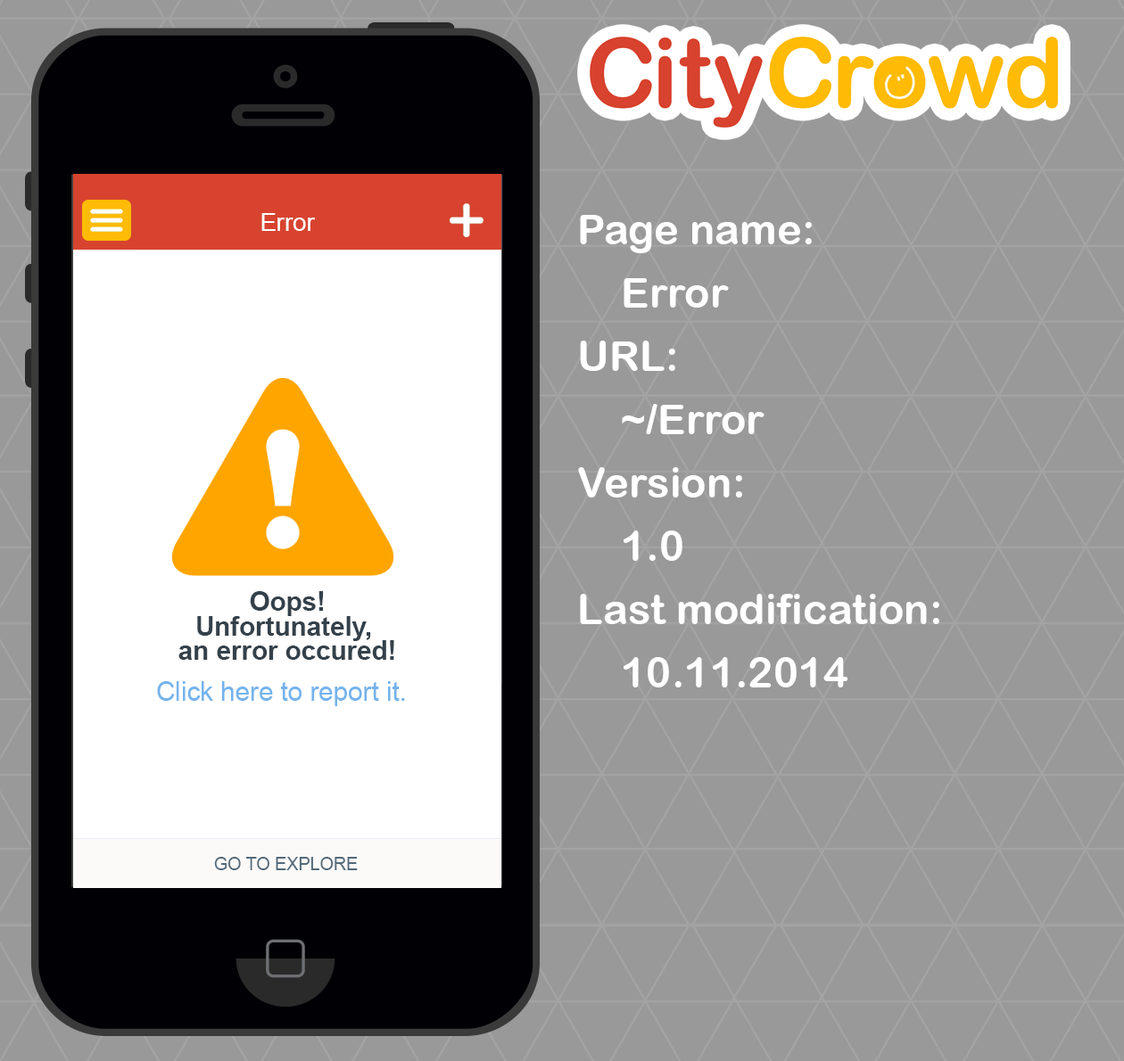
<style>
.page{position:relative;width:1124px;height:1061px;background:#999999}
.page>*{position:absolute;margin:0}
.t1{font:24.6px "ArialMT";color:#ffffff}
.t2{font:42.2px/63.3px "ArialRoundedMTBold";color:#ffffff}
.t3{font:26.4px/24.6px "Arial-BoldMT";color:#34414b}
.t4{font:26.4px "ArialMT";color:#74b3ed}
.t5{font:17.6px "ArialMT";color:#536a7a}
</style>
<div class="page">
<p class="t1" style="left:261px;top:213px;width:54px;height:18px">Error</p>
<p class="t2" style="left:578px;top:215px;width:361px;height:473px">Page name:<br>Error<br>URL:<br>~/Error<br>Version:<br>1.0<br>Last modification:<br>10.11.2014</p>
<p class="t3" style="left:178px;top:591px;width:216px;height:69px;text-align:center">Oops!<br>Unfortunately, <br>an error occured!</p>
<p class="t4" style="left:157px;top:681px;width:248px;height:25px">Click here to report it.</p>
<p class="t5" style="left:214px;top:857px;width:144px;height:13px">GO TO EXPLORE</p>
</div>
